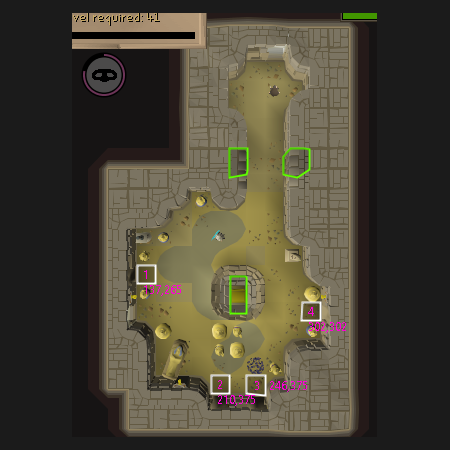
<style>
.page{position:relative;width:450px;height:450px;background:#1b1b1b}
.page>*{position:absolute;margin:0}
.t1{font:12px "SegoeUI";color:#ff00d8}
</style>
<div class="page">
<p class="t1" style="left:144px;top:270px;width:37px;height:26px">1<br>137,265</p>
<p class="t1" style="left:308px;top:307px;width:38px;height:26px">4<br>302,302</p>
<p class="t1" style="left:218px;top:380px;width:37px;height:26px">2<br>210,375</p>
<p class="t1" style="left:255px;top:381px;width:52px;height:11px">3   246,375</p>
</div>
